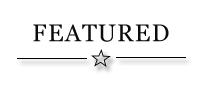
<style>
.page{position:relative;width:200px;height:100px;background:#ffffff}
.page>*{position:absolute;margin:0}
.t1{font:24px "Vani";letter-spacing:0.045em;color:#0c0b0b}
</style>
<div class="page">
<p class="t1" style="left:33px;top:24px;width:136px;height:18px">FEATURED</p>
</div>
